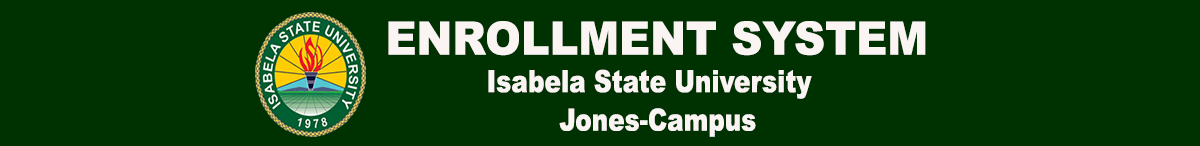
<style>
.page{position:relative;width:1200px;height:146px;background:#003201}
.page>*{position:absolute;margin:0}
.t1{font:46px "Arial-Black";color:#faf4f3;scale:0.94 1}
.t2{font:30.6px "Arial-Black";color:#faf4f3;scale:0.81 1}
</style>
<div class="page">
<p class="t1" style="left:388px;top:21px;width:538px;height:35px">ENROLLMENT SYSTEM</p>
<p class="t2" style="left:488px;top:69px;width:324px;height:30px">Isabela State University</p>
<p class="t2" style="left:559px;top:108px;width:197px;height:29px">Jones-Campus</p>
</div>
